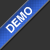
<style>
.page{position:relative;width:50px;height:50px;background:#333333}
.page>*{position:absolute;margin:0}
.t1{font:11px "Helvetica-Bold";color:#ffffff}
</style>
<div class="page">
<p class="t1" style="left:5px;top:6px;width:28px;height:28px;rotate:-45deg">DEMO</p>
</div>
